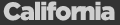
<style>
.page{position:relative;width:120px;height:25px;background:#333333}
.page>*{position:absolute;margin:0}
.t1{font:25px "GothamBlack";letter-spacing:-0.05em;color:#cfcfcf}
</style>
<div class="page">
<p class="t1" style="left:3px;top:1px;width:112px;height:20px">California</p>
</div>
